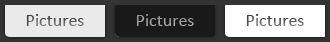
<style>
.page{position:relative;width:330px;height:42px;background:#191919}
.page>*{position:absolute;margin:0}
.t1{font:18px "Calibri"}
.t2{font:18px "Calibri";color:#9f9f9f}
</style>
<div class="page">
<p class="t1" style="left:26px;top:14px;width:58px;height:12px">Pictures</p>
<p class="t2" style="left:136px;top:14px;width:58px;height:12px">Pictures</p>
<p class="t1" style="left:246px;top:14px;width:58px;height:12px">Pictures</p>
</div>
